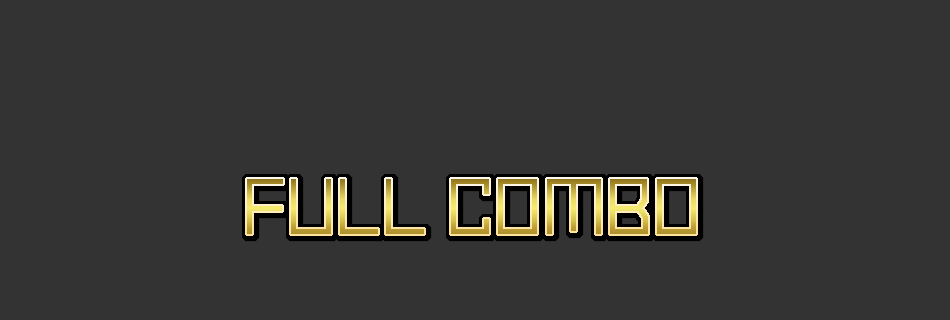
<style>
.page{position:relative;width:950px;height:320px;background:#333333}
.page>*{position:absolute;margin:0}
.t1{font:67.7px "Makinas-4-Square";letter-spacing:-0.02em}
</style>
<div class="page">
<p class="t1" style="left:247px;top:179px;width:450px;height:55px">FULL COMBO</p>
</div>
